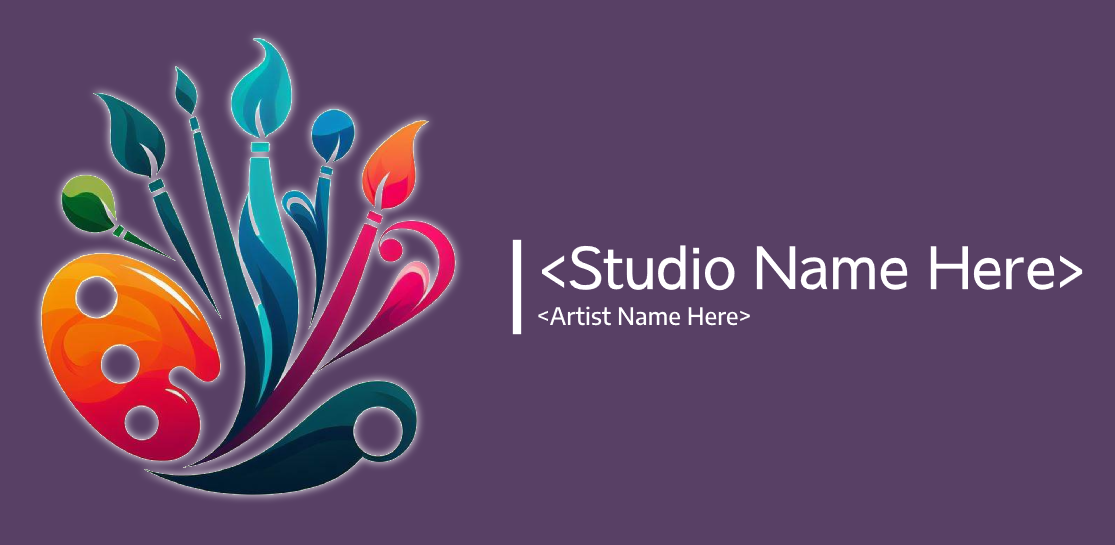
<style>
.page{position:relative;width:1115px;height:545px;background:#584065}
.page>*{position:absolute;margin:0}
.t1{font:59px "SawarabiGothic-Medium";color:#ffffff}
.t2{font:24px "EncodeSans-Medium";color:#ffffff}
</style>
<div class="page">
<p class="t1" style="left:541px;top:245px;width:542px;height:46px">&lt;Studio Name Here&gt;</p>
<p class="t2" style="left:538px;top:306px;width:212px;height:20px">&lt;Artist Name Here&gt;</p>
</div>
